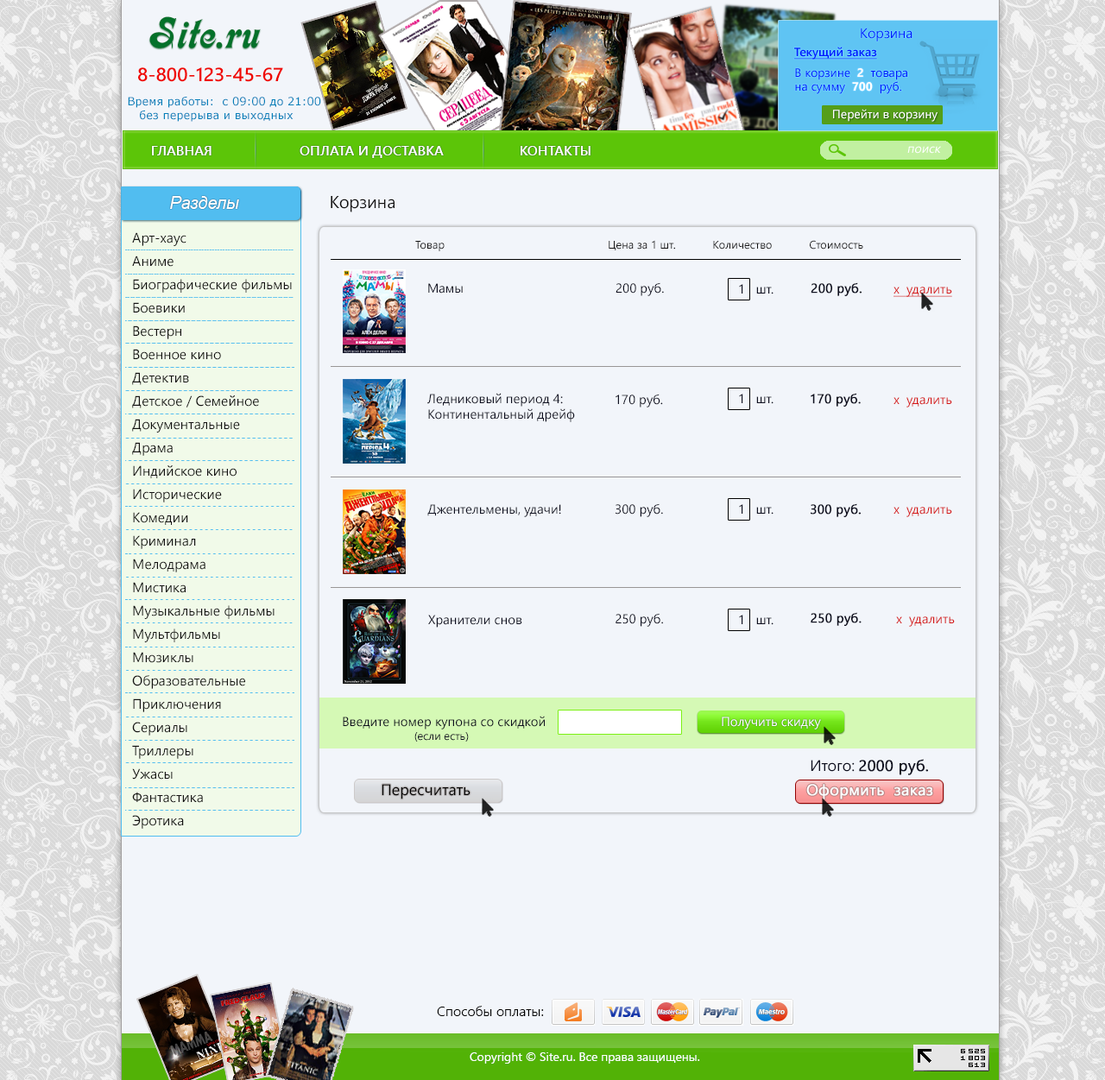
<style>
.page{position:relative;width:1105px;height:1080px;background:#f2f5fa}
.page>*{position:absolute;margin:0}
.t1{font:41.4px "Calligraph-Medium";color:#04712a}
.t2{font:13.8px "SegoeUI";color:#0119ff}
.t3{font:12.1px "SegoeUI-Semibold";color:#0018ff;text-decoration:underline}
.t4{font:19px "SegoeUI-Semibold";color:#ef0a05}
.t5{font:12.1px/13.8px "SegoeUI";color:#0018ff}
.t6{font:12.1px/13.8px "SegoeUI-Bold";color:#fbfbfd}
.t7{font:12.1px/13.8px "SegoeUI-Bold";color:#fefeff}
.t8{font:11.2px/13.8px "Verdana";color:#0480ba}
.t9{font:12.1px "SegoeUI";color:#ffffff}
.t10{font:13.8px "SegoeUI-Semibold";color:#ffffff}
.t11{font:12.4px "SegoeUI";color:#ffffff;font-style:italic}
.t12{font:17.3px "Arial-ItalicMT";color:#ffffff}
.t13{font:17.3px "SegoeUI";color:#131212}
.t14{font:13.8px/23.3px "SegoeUI";color:#131212}
.t15{font:11.2px "SegoeUI";color:#131212}
.t16{font:12.9px "SegoeUI";color:#0e0f1f}
.t17{font:12.9px "SegoeUI";color:#0e0f1f;font-weight:bold}
.t18{font:12.9px "SegoeUI";color:#d51616;text-decoration:underline}
.t19{font:12.9px "SegoeUI";color:#d51616}
.t20{font:12.9px "SegoeUI";color:#ffffff}
.t21{font:11.2px "SegoeUI";color:#0e0f1f}
.t22{font:15.5px "SegoeUI";color:#0e0f1f;font-weight:bold}
.t23{font:15.5px "SegoeUI";color:#0e0f1f}
.t24{font:15.5px "SegoeUI";color:#000000}
.t25{font:15.5px "SegoeUI";color:#ffffff;font-weight:bold}
.t26{font:13.8px "SegoeUI-Semilight";color:#000000}
</style>
<div class="page">
<p class="t1" style="left:149px;top:16px;width:112px;height:32px">Site.ru</p>
<p class="t2" style="left:860px;top:28px;width:52px;height:13px">Корзина</p>
<p class="t3" style="left:793px;top:47px;width:84px;height:13px">Текущий заказ</p>
<p class="t4" style="left:138px;top:67px;width:145px;height:15px">8-800-123-45-67</p>
<p class="t5" style="left:795px;top:68px;width:112px;height:26px;text-align:justify">В корзине  <span class="t6">2  </span>товара<br>на сумму  <span class="t7">700  </span>руб.</p>
<p class="t8" style="left:128px;top:97px;width:193px;height:25px;text-align:justify">Время работы:  с 09:00 до 21:00 <br>   без перерыва и выходных</p>
<p class="t9" style="left:833px;top:109px;width:104px;height:13px">Перейти в корзину</p>
<p class="t10" style="left:152px;top:146px;width:438px;height:12px">ГЛАВНАЯ                       ОПЛАТА И ДОСТАВКА                    КОНТАКТЫ</p>
<p class="t11" style="left:907px;top:146px;width:34px;height:8px">поиск</p>
<p class="t12" style="left:170px;top:196px;width:69px;height:13px">Разделы</p>
<p class="t13" style="left:331px;top:196px;width:63px;height:16px">Корзина</p>
<p class="t14" style="left:132px;top:232px;width:160px;height:596px;text-align:justify">Арт-хаус<br>Аниме<br>Биографические фильмы<br>Боевики<br>Вестерн<br>Военное кино<br>Детектив<br>Детское / Семейное<br>Документальные<br>Драма<br>Индийское кино<br>Исторические<br>Комедии<br>Криминал<br>Мелодрама<br>Мистика<br>Музыкальные фильмы<br>Мультфильмы<br>Мюзиклы<br>Образовательные<br>Приключения<br>Сериалы<br>Триллеры<br>Ужасы<br>Фантастика<br>Эротика</p>
<p class="t15" style="left:415px;top:240px;width:448px;height:11px">Товар                                                     Цена за 1 шт.            Количество            Стоимость</p>
<p class="t16" style="left:428px;top:283px;width:35px;height:10px">Мамы</p>
<p class="t16" style="left:615px;top:282px;width:49px;height:14px">200 руб.</p>
<p class="t16" style="left:739px;top:284px;width:34px;height:10px">1   шт.</p>
<p class="t17" style="left:810px;top:282px;width:51px;height:14px">200 руб.</p>
<p class="t18" style="left:893px;top:286px;width:59px;height:11px">x  удалить</p>
<p class="t16" style="left:427px;top:393px;width:148px;height:29px;text-align:justify">Ледниковый период 4: <br>Континентальный дрейф</p>
<p class="t16" style="left:615px;top:394px;width:48px;height:13px">170 руб.</p>
<p class="t16" style="left:739px;top:394px;width:34px;height:10px">1   шт.</p>
<p class="t17" style="left:810px;top:393px;width:50px;height:13px">170 руб.</p>
<p class="t19" style="left:893px;top:397px;width:59px;height:10px">x  удалить</p>
<p class="t16" style="left:427px;top:504px;width:134px;height:13px">Джентельмены, удачи!</p>
<p class="t16" style="left:615px;top:503px;width:48px;height:14px">300 руб.</p>
<p class="t16" style="left:739px;top:504px;width:34px;height:10px">1   шт.</p>
<p class="t17" style="left:810px;top:503px;width:50px;height:14px">300 руб.</p>
<p class="t19" style="left:893px;top:507px;width:59px;height:10px">x  удалить</p>
<p class="t16" style="left:428px;top:614px;width:94px;height:13px">Хранители снов</p>
<p class="t16" style="left:615px;top:613px;width:48px;height:13px">250 руб.</p>
<p class="t16" style="left:739px;top:614px;width:34px;height:11px">1   шт.</p>
<p class="t17" style="left:810px;top:612px;width:51px;height:14px">250 руб.</p>
<p class="t19" style="left:896px;top:616px;width:58px;height:10px">x  удалить</p>
<p class="t16" style="left:343px;top:715px;width:202px;height:14px">Введите номер купона со скидкой</p>
<p class="t20" style="left:721px;top:716px;width:100px;height:13px">Получить скидку</p>
<p class="t21" style="left:414px;top:732px;width:55px;height:9px">(если есть)</p>
<p class="t22" style="left:810px;top:759px;width:118px;height:16px"><span class="t23">Итого: </span>2000 руб.</p>
<p class="t24" style="left:381px;top:784px;width:89px;height:15px">Пересчитать</p>
<p class="t24" style="left:381px;top:784px;width:89px;height:15px">Пересчитать</p>
<p class="t25" style="left:806px;top:784px;width:127px;height:15px">Оформить  заказ</p>
<p class="t26" style="left:437px;top:1005px;width:107px;height:11px">Способы оплаты:</p>
<p class="t9" style="left:469px;top:1052px;width:231px;height:11px">Copyright © Site.ru. Все права защищены.</p>
</div>
